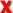
<style>
.page{position:relative;width:13px;height:13px;background:#ff0000}
.page>*{position:absolute;margin:0}
.t1{font:18px "ArmWrestler-Bold";color:#ff0000}
</style>
<div class="page">
<p class="t1" style="left:0px;top:0px;width:12px;height:14px">X</p>
</div>
